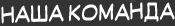
<style>
.page{position:relative;width:175px;height:26px;background:#333333}
.page>*{position:absolute;margin:0}
.t1{font:26px "SuplexmentaryComicNC";color:#ffffff;scale:0.8 1}
</style>
<div class="page">
<p class="t1" style="left:1px;top:2px;width:174px;height:22px;rotate:-2deg">НАША КОМАНДА</p>
</div>
